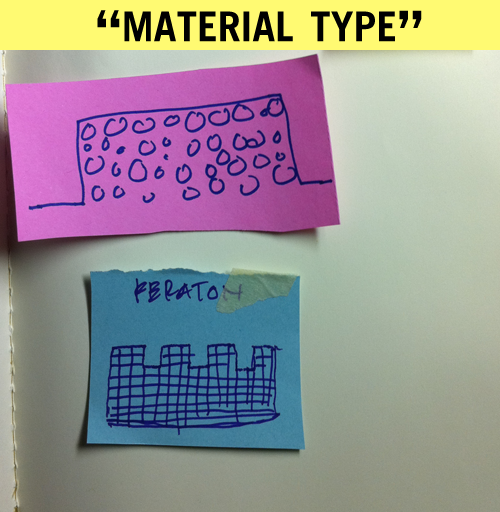
<style>
.page{position:relative;width:500px;height:512px}
.page>*{position:absolute;margin:0}
.t1{font:59px "TradeGothicLTStd-Bold";color:#000000;font-variant:small-caps}
</style>
<div class="page">
<p class="t1" style="left:97px;top:10px;width:325px;height:32px">“material type”</p>
</div>
